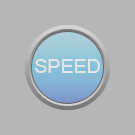
<style>
.page{position:relative;width:135px;height:135px;background:#b6b6b6}
.page>*{position:absolute;margin:0}
.t1{font:18.8px "ArialMT";color:#e5e5e5;scale:1.05 1}
</style>
<div class="page">
<p class="t1" style="left:35px;top:59px;width:65px;height:14px">SPEED</p>
</div>
